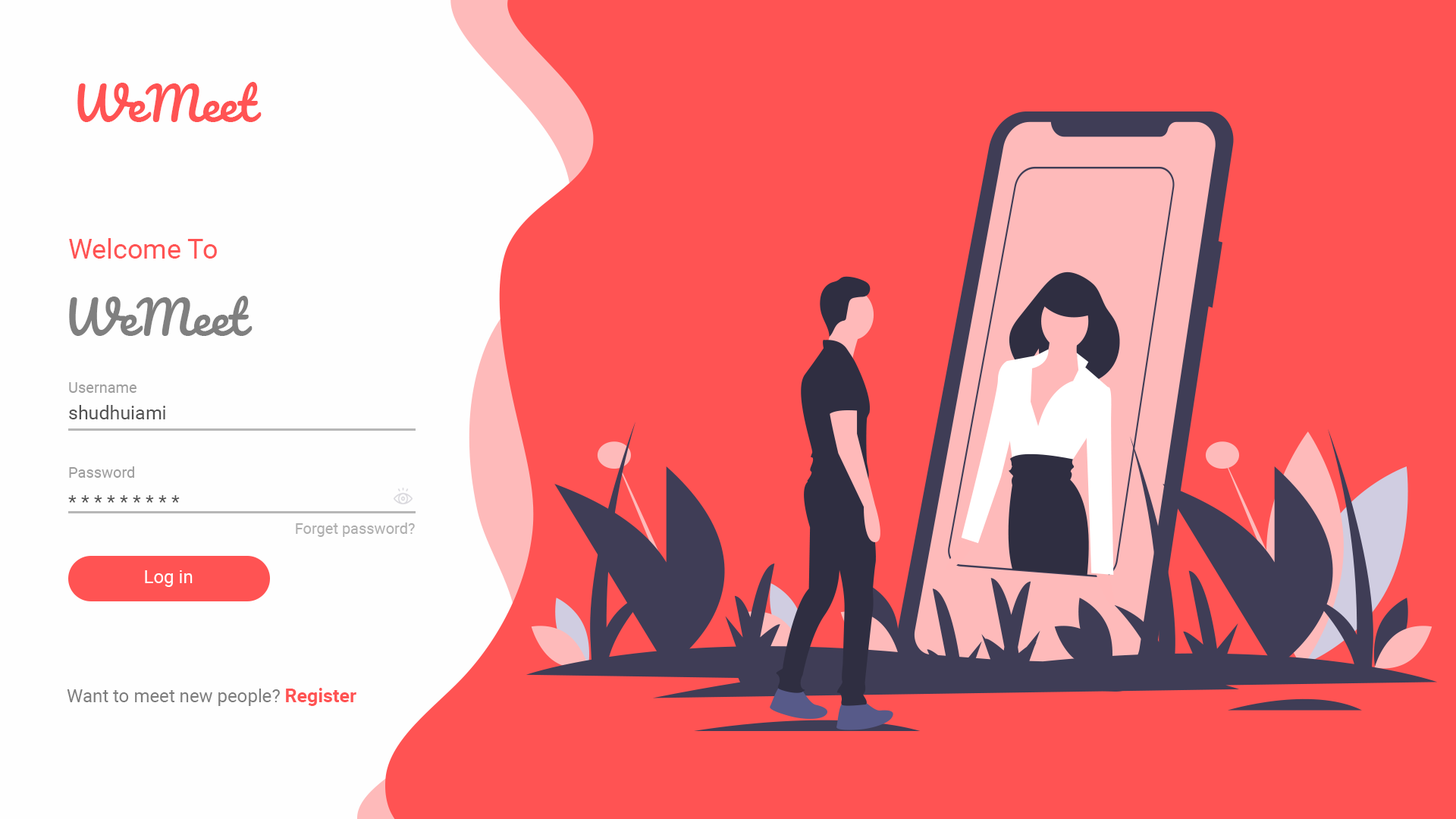
<style>
.page{position:relative;width:1456px;height:819px;background:#ff5353}
.page>*{position:absolute;margin:0}
.t1{font:45.5px "Pacifico-Regular";color:#ff5353}
.t2{font:27.3px "Roboto-Regular";color:#ff5353}
.t3{font:45.5px "Pacifico-Regular";color:#7f7f7f}
.t4{font:15.2px "Roboto-Regular";color:#9e9e9e}
.t5{font:19px "Roboto-Regular";color:#515151}
.t6{font:15.2px "Roboto-Regular";color:#aeaeae}
.t7{font:18.2px "Roboto-Regular";color:#ffffff}
.t8{font:18.2px "Roboto-Regular";color:#7d7d7d}
.t9{font:19px "Roboto-Bold";color:#ff5353}
</style>
<div class="page">
<p class="t1" style="left:77px;top:82px;width:185px;height:40px">WeMeet</p>
<p class="t2" style="left:69px;top:238px;width:148px;height:21px">Welcome To</p>
<p class="t3" style="left:69px;top:296px;width:184px;height:40px">WeMeet</p>
<p class="t4" style="left:69px;top:382px;width:67px;height:11px">Username</p>
<p class="t5" style="left:69px;top:405px;width:96px;height:14px">shudhuiami</p>
<p class="t4" style="left:69px;top:466px;width:65px;height:12px">Password</p>
<p class="t5" style="left:68px;top:495px;width:112px;height:8px">* * * * * * * * *</p>
<p class="t6" style="left:296px;top:522px;width:119px;height:15px">Forget password?</p>
<p class="t7" style="left:145px;top:570px;width:48px;height:17px">Log in</p>
<p class="t8" style="left:67px;top:688px;width:289px;height:18px">Want to meet new people? <span class="t9">Register</span></p>
</div>
